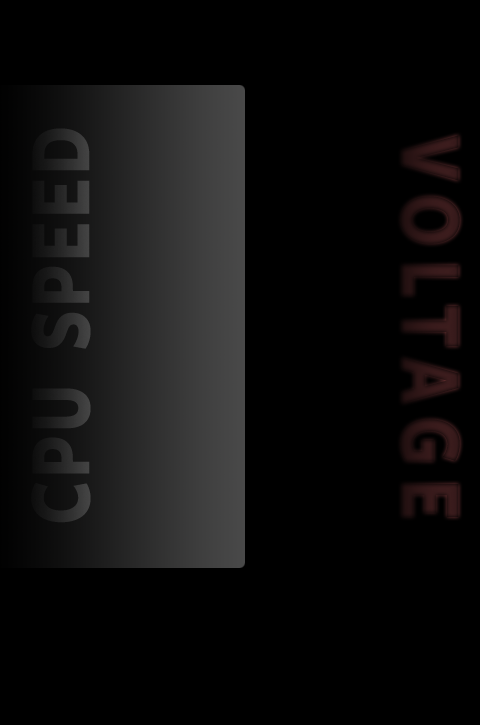
<style>
.page{position:relative;width:480px;height:725px;background:#000000}
.page>*{position:absolute;margin:0}
.t1{font:90.3px "FreightSansBold";letter-spacing:0.04em;color:#252525;scale:0.8 1}
.t2{font:90.3px "FreightSansBold";letter-spacing:0.2em;color:#2d1616;scale:0.8 1}
</style>
<div class="page">
<p class="t1" style="left:31px;top:128px;width:60px;height:395px;rotate:-90deg">CPU  SPEED</p>
<p class="t2" style="left:400px;top:135px;width:60px;height:382px;rotate:90deg">VOLTAGE</p>
</div>
